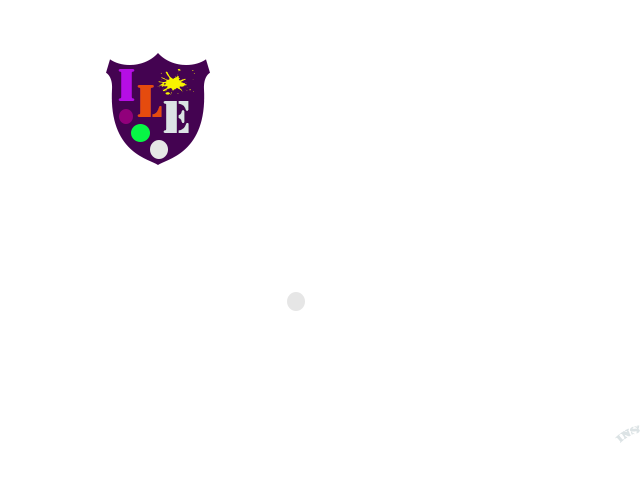
<style>
.page{position:relative;width:640px;height:480px;background:#ffffff}
.page>*{position:absolute;margin:0}
.t1{font:48px "Stencil";color:#b50ee5}
.t2{font:48px "Stencil";color:#e54b0e}
.t3{font:48px "Stencil";color:#dce3e5}
</style>
<div class="page">
<p class="t1" style="left:118px;top:69px;width:17px;height:32px">I</p>
<p class="t2" style="left:137px;top:85px;width:25px;height:32px">L</p>
<p class="t3" style="left:163px;top:101px;width:26px;height:32px">E</p>
</div>
